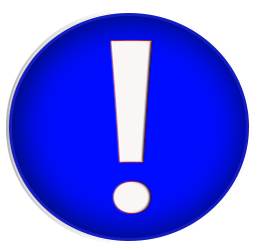
<style>
.page{position:relative;width:258px;height:250px;background:#ffffff}
.page>*{position:absolute;margin:0}
.t1{font:250px "MyriadPro-Regular";color:#fbf6f6}
</style>
<div class="page">
<p class="t1" style="left:111px;top:40px;width:41px;height:173px">!</p>
</div>
